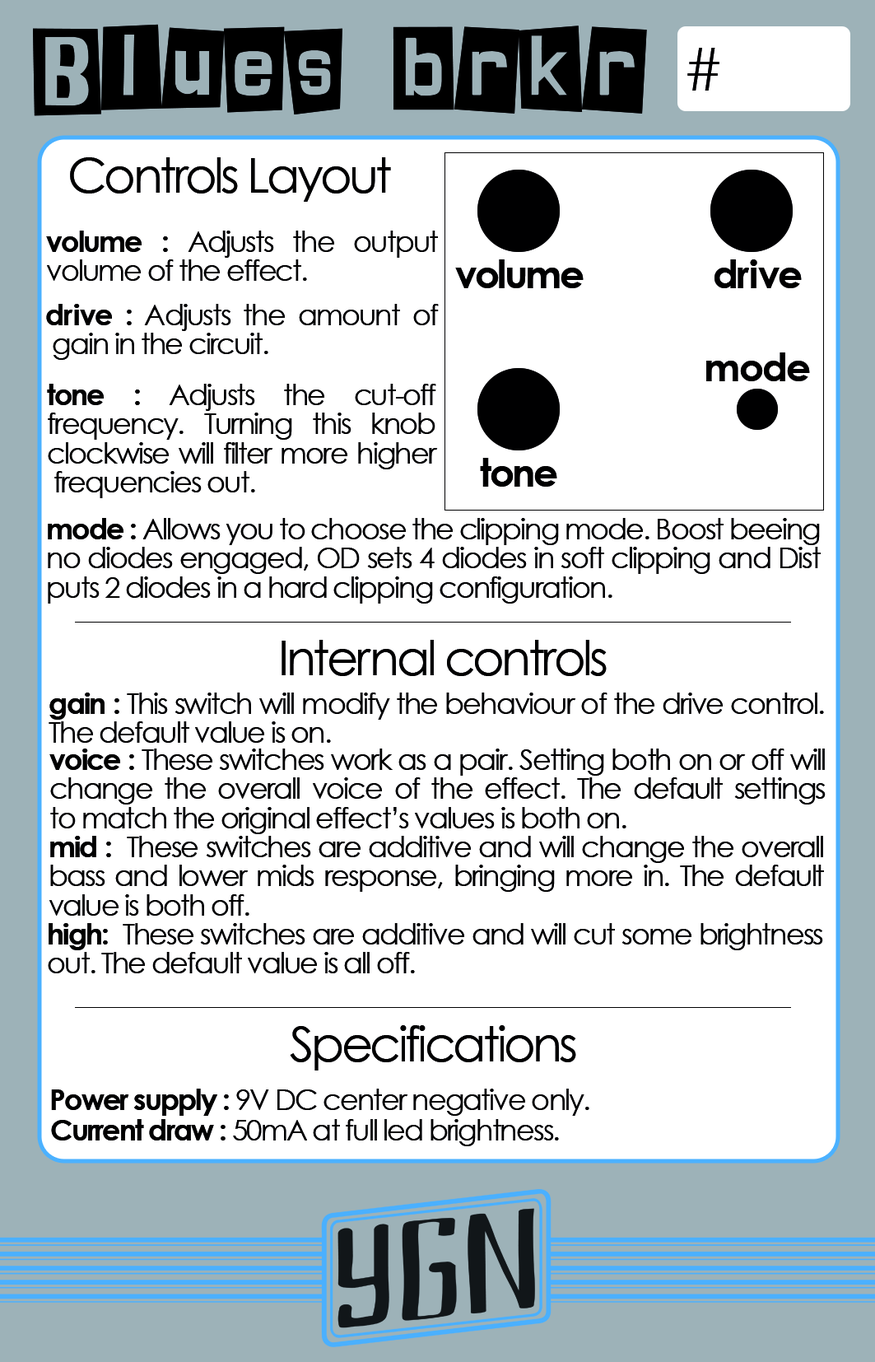
<style>
.page{position:relative;width:875px;height:1362px;background:#ffffff}
.page>*{position:absolute;margin:0}
.t1{font:102.1px "SHINJI-BLUES";color:#000000}
.t2{font:58.4px "CenturyGothic";color:#000000}
.t3{font:48.6px "CenturyGothic";letter-spacing:-0.06em;color:#000000}
.t4{font:29.2px/29.2px "CenturyGothic";letter-spacing:-0.06em;color:#000000}
.t5{font:29.2px/29.2px "CenturyGothic-Bold";letter-spacing:-0.06em;color:#000000}
.t6{font:38.9px "CenturyGothic-Bold";letter-spacing:-0.06em;color:#000000}
.t7{font:38.9px "CenturyGothic-Bold";color:#000000}
.t8{font:29.2px/29.2px "CenturyGothic-Bold";letter-spacing:0.02em;color:#000000}
.t9{font:29.2px/29.2px "CenturyGothic-Bold";color:#000000}
.t10{font:38.9px "CenturyGothic-Bold";letter-spacing:-0.04em;color:#000000}
.t11{font:48.6px "CenturyGothic";color:#000000}
.t12{font:29.2px "CenturyGothic";letter-spacing:-0.06em;color:#000000}
.t13{font:29.2px "CenturyGothic-Bold";letter-spacing:-0.06em;color:#000000}
</style>
<div class="page">
<p class="t1" style="left:33px;top:24px;width:614px;height:92px">Blues brkr</p>
<p class="t2" style="left:688px;top:48px;width:32px;height:43px">#</p>
<p class="t3" style="left:70px;top:157px;width:321px;height:45px">Controls Layout</p>
<p class="t4" style="left:46px;top:231px;width:392px;height:50px;text-align:justify"><span class="t5">volume : </span>Adjusts the output<br>volume of the effect.</p>
<p class="t6" style="left:455px;top:259px;width:129px;height:29px">volume</p>
<p class="t7" style="left:715px;top:259px;width:87px;height:29px"><span class="t6">d</span>ri<span class="t6">ve</span></p>
<p class="t4" style="left:46px;top:304px;width:393px;height:56px;text-align:justify"><span class="t5">d</span><span class="t8">r</span><span class="t9">i</span><span class="t5">ve :</span> Adjusts the amount of<br> gain in the circuit.</p>
<p class="t10" style="left:707px;top:352px;width:103px;height:29px">mode</p>
<p class="t4" style="left:47px;top:384px;width:391px;height:114px;text-align:justify"><span class="t5">tone : </span>Adjusts the cut-off <br>frequency. Turning this knob clockwise will filter more higher<br> frequencies out.</p>
<p class="t6" style="left:480px;top:458px;width:78px;height:29px">tone</p>
<p class="t4" style="left:48px;top:518px;width:773px;height:86px;text-align:justify"><span class="t5">mode :</span> Allows you to choose the clipping mode. Boost beeing<br>no diodes engaged, OD sets 4 diodes in soft clipping and Dist<br>puts 2 diodes in a hard clipping configuration.</p>
<p class="t3" style="left:282px;top:640px;width:325px;height:36px">Inte<span class="t11">r</span>nal controls</p>
<p class="t4" style="left:49px;top:693px;width:775px;height:50px;text-align:justify"><span class="t5">gain :</span> This switch will modify the behaviour of the drive control.<br>The default value is on.</p>
<p class="t4" style="left:49px;top:749px;width:777px;height:85px;text-align:justify"><span class="t5">voice :</span> These switches work as a pair. Setting both on or off will change the overall voice of the effect. The default settings<br>to match the original effect’s values is both on.</p>
<p class="t4" style="left:49px;top:836px;width:775px;height:80px;text-align:justify"><span class="t5">mid :</span>  These switches are additive and will change the overall bass and lower mids response, bringing more in. The default <br>value is both off.</p>
<p class="t4" style="left:48px;top:923px;width:776px;height:50px;text-align:justify"><span class="t5">high:</span>  These switches are additive and will cut some brightness<br>out. The default value is all off.</p>
<p class="t3" style="left:290px;top:1025px;width:286px;height:46px">Specifications</p>
<p class="t12" style="left:51px;top:1089px;width:539px;height:27px"><span class="t13">Power supply : </span>9V DC center negative only.</p>
<p class="t12" style="left:51px;top:1119px;width:508px;height:27px"><span class="t13">Current draw : </span>50mA at full led brightness.</p>
</div>
